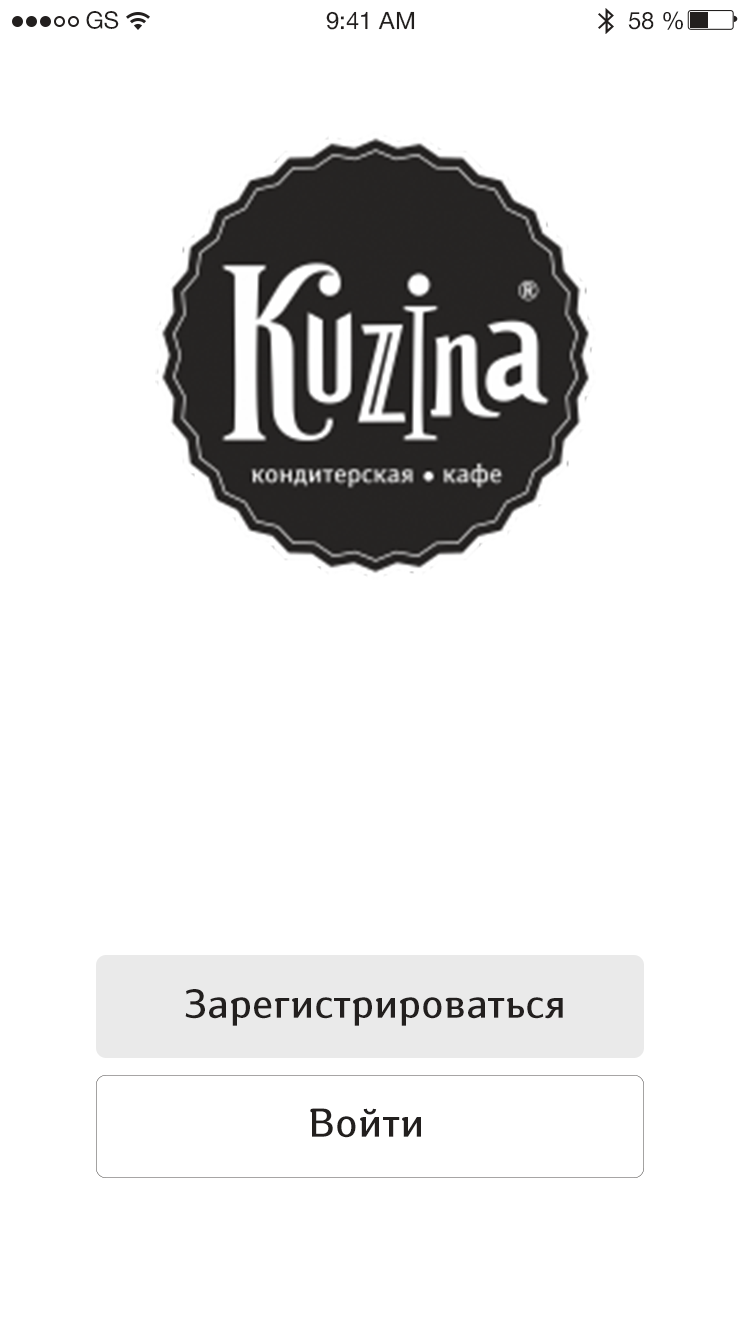
<style>
.page{position:relative;width:750px;height:1335px;background:#ffffff}
.page>*{position:absolute;margin:0}
.t1{font:24px "HelveticaNeueCyr-Roman";color:#221f1e}
.t2{font:40px "SusanBook-Regular";color:#221f1e}
</style>
<div class="page">
<p class="t1" style="left:86px;top:11px;width:33px;height:18px">GS</p>
<p class="t1" style="left:326px;top:11px;width:89px;height:19px">9:41 AM</p>
<p class="t1" style="left:628px;top:11px;width:55px;height:19px">58 %</p>
<p class="t2" style="left:185px;top:989px;width:378px;height:37px">Зарегистрироваться</p>
<p class="t2" style="left:310px;top:1108px;width:111px;height:30px">Войти</p>
</div>
